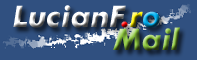
<style>
.page{position:relative;width:197px;height:60px;background:#305080}
.page>*{position:absolute;margin:0}
.t1{font:29.9px "FuturaBT-BoldItalic"}
</style>
<div class="page">
<p class="t1" style="left:13px;top:5px;width:147px;height:23px">LucianF.ro</p>
<p class="t1" style="left:113px;top:27px;width:67px;height:24px">Mail</p>
</div>
